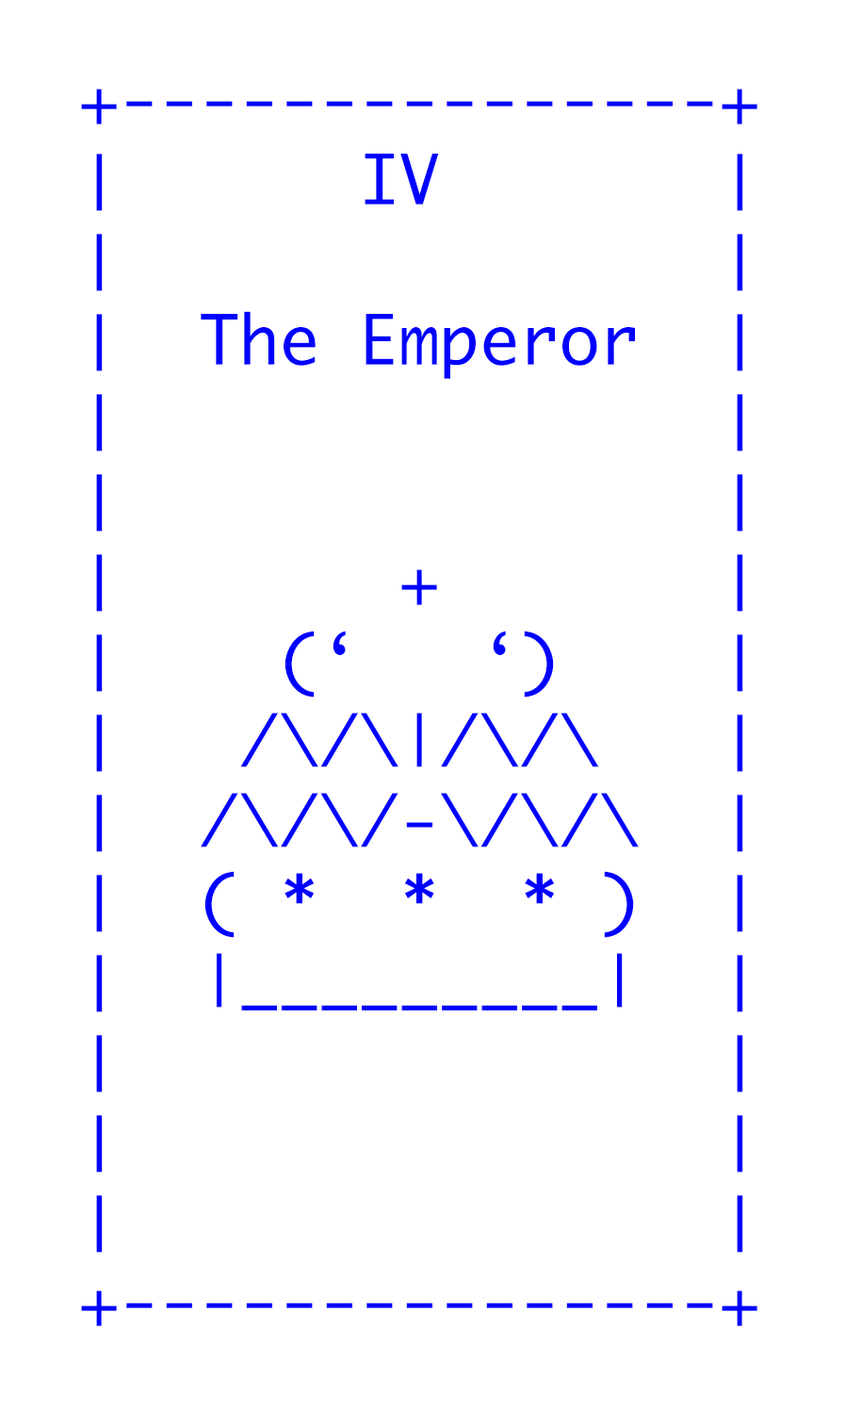
<style>
.page{position:relative;width:845px;height:1411px;background:#ffffff}
.page>*{position:absolute;margin:0}
.t1{font:66.7px "Monaco";color:#0000ff}
</style>
<div class="page">
<p class="t1" style="left:81px;top:89px;width:677px;height:1237px">+---------------+<br>│      IV       │<br>│               │<br>│  The Emperor  │<br>│               │<br>│               │<br>│       +       │<br>│    (‘   ‘)    │ <br>│   /\/\|/\/\   │ <br>│  /\/\/-\/\/\  │ <br>│  ( *  *  * )  │<br>│  |_________|  │    <br>│               │<br>│               │<br>│               │<br>+---------------+</p>
</div>
